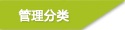
<style>
.page{position:relative;width:125px;height:30px;background:#a8c122}
.page>*{position:absolute;margin:0}
.t1{font:12px "MicrosoftYaHei";letter-spacing:0.025em;color:#ffffff;font-weight:bold}
</style>
<div class="page">
<p class="t1" style="left:18px;top:9px;width:51px;height:13px">管理分类</p>
</div>
